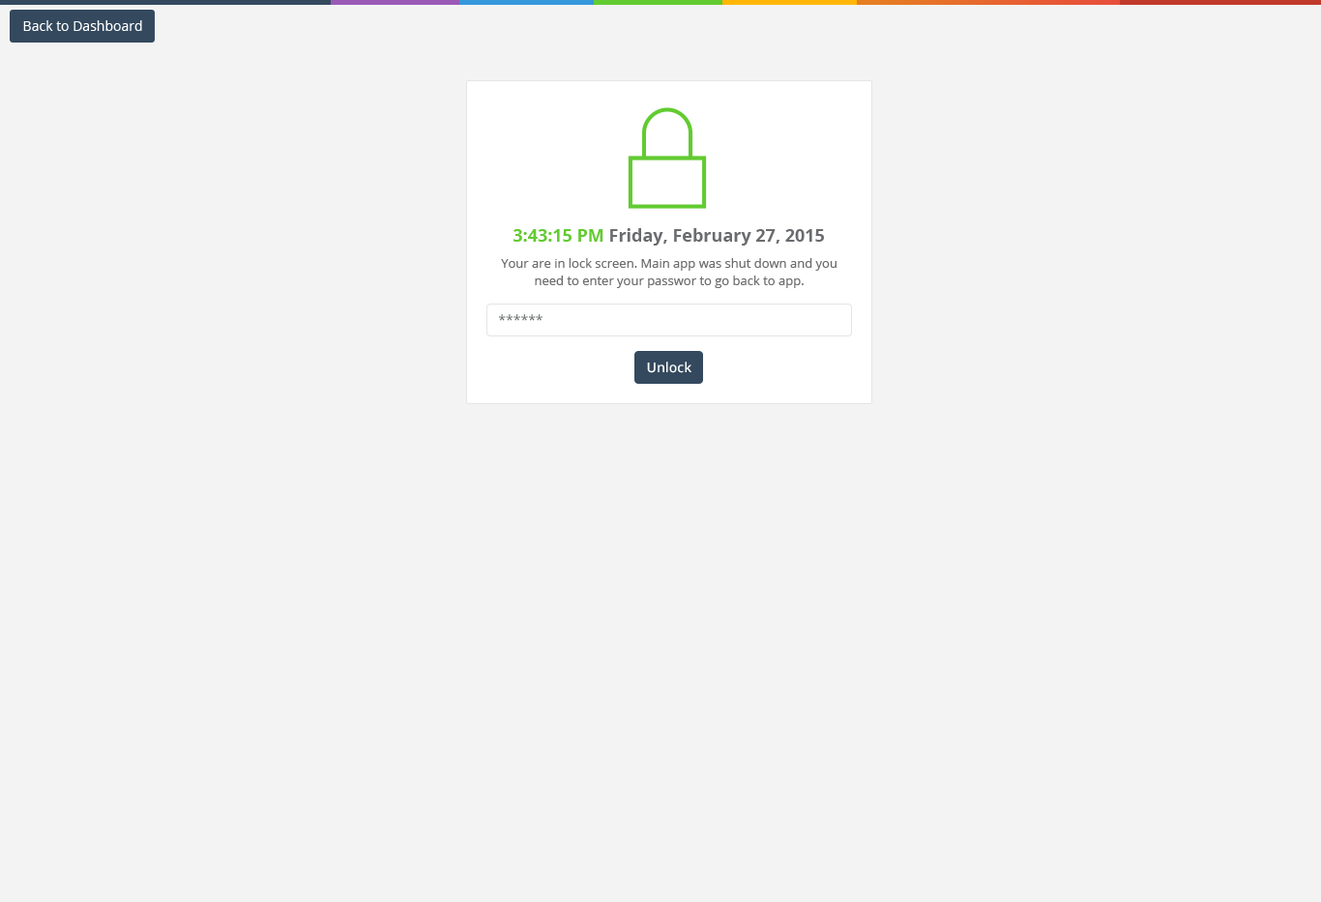
<style>
.page{position:relative;width:1321px;height:902px;background:#f3f3f4}
.page>*{position:absolute;margin:0}
.t1{font:13.5px "OpenSans";color:#ffffff}
.t2{font:17.4px "OpenSans-Bold";color:#6a6c6f}
.t3{font:17.4px "OpenSans-Bold";color:#62cb31}
.t4{font:12.6px/17.4px "OpenSans";color:#6f6c6f}
.t5{font:13.5px "OpenSans";color:#676a6c}
.t6{font:13.5px "OpenSans-Semibold";color:#ffffff}
</style>
<div class="page">
<p class="t1" style="left:23px;top:20px;width:119px;height:11px">Back to Dashboard</p>
<p class="t2" style="left:513px;top:228px;width:311px;height:18px"><span class="t3">3:43:15 PM </span>Friday, February 27, 2015</p>
<p class="t4" style="left:501px;top:258px;width:336px;height:30px;text-align:center">Your are in lock screen. Main app was shut down and you need to enter your passwor to go back to app.</p>
<p class="t5" style="left:498px;top:314px;width:45px;height:7px">******</p>
<p class="t6" style="left:647px;top:362px;width:45px;height:11px">Unlock</p>
</div>
